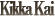
<style>
.page{position:relative;width:55px;height:18px;background:#ffffff}
.page>*{position:absolute;margin:0}
.t1{font:18px "RyuminPro-ExBold";letter-spacing:-0.17em;color:#4a3f32;font-weight:bold;scale:0.8 1}
</style>
<div class="page">
<p class="t1" style="left:0px;top:1px;width:55px;height:15px">Kikka Kai</p>
</div>
